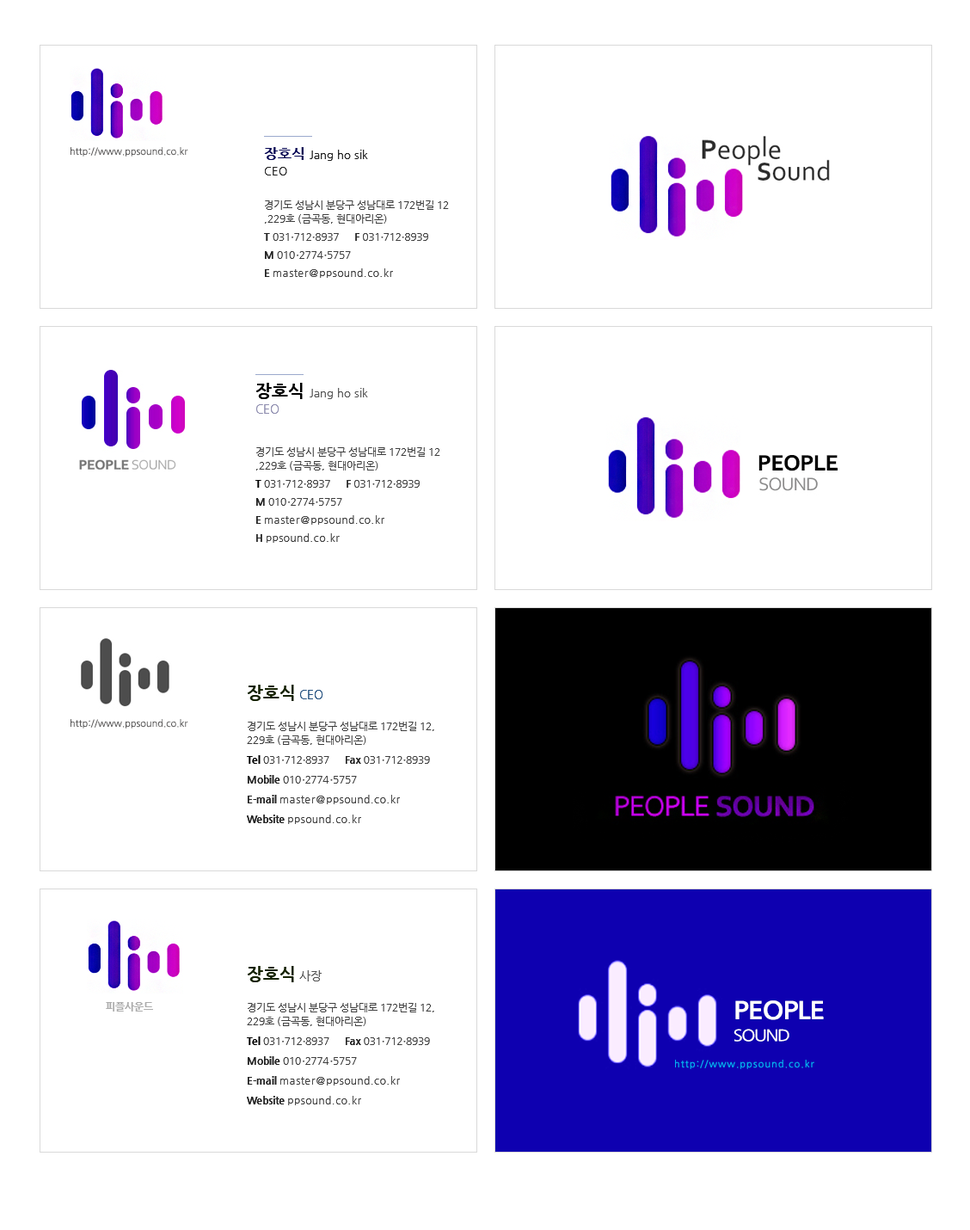
<style>
.page{position:relative;width:970px;height:1230px;background:#ffffff}
.page>*{position:absolute;margin:0}
.t1{font:9.5px "NanumGothic";color:#595858}
.t2{font:11.2px/16.3px "NanumGothic";color:#1e1e1e}
.t3{font:9.5px/16.3px "NanumGothic";color:#3f3f3f}
.t4{font:14.6px/16.3px "NanumGothicBold";color:#000051}
.t5{font:10.3px/18.9px "NanumGothic";color:#3f3f3f}
.t6{font:10.3px/13.8px "NanumGothic";color:#3f3f3f}
.t7{font:10.3px/18.1px "NanumGothicExtraBold";color:#232323}
.t8{font:10.3px/18.1px "NanumGothic";color:#3f3f3f}
.t9{font:10.3px/18.1px "NanumGothic";color:#3f3f3f;font-weight:bold}
.t10{font:10.3px/18.1px "NanumGothic";letter-spacing:0.05em;color:#3f3f3f}
.t11{font:11.2px/16.3px "NanumGothic";color:#555555}
.t12{font:17.2px/16.3px "NanumGothicBold";color:#000000}
.t13{font:12px/16.3px "NanumGothic";color:#8e8daf}
.t14{font:10.3px/18.1px "NanumGothicExtraBold";color:#000000}
.t15{font:17.2px "NanumGothicBold";color:#162301}
.t16{font:9.5px "NanumGothic";color:#3f3f3f}
.t17{font:12px "NanumGothic";color:#23507f}
.t18{font:10.3px/19.8px "NanumGothicExtraBold";color:#000000}
.t19{font:10.3px/19.8px "NanumGothic";color:#3f3f3f}
.t20{font:10.3px/19.8px "NanumGothic";color:#3f3f3f;font-weight:bold}
.t21{font:10.3px/19.8px "NanumGothicExtraBold";color:#232323}
.t22{font:10.3px/19.8px "NanumGothic";letter-spacing:0.05em;color:#3f3f3f}
.t23{font:12px "NanumGothic";color:#525252}
.t24{font:10.3px "NanumGothicExtraBold";color:#acacac}
.t25{font:24.1px/22.4px "NanumGothicBold";letter-spacing:-0.05em;color:#ffffff;scale:1.15 1}
.t26{font:15.5px/22.4px "NanumGothic";letter-spacing:-0.075em;color:#ffffff;scale:1.15 1}
.t27{font:9.5px "NanumGothic";letter-spacing:0.1em;color:#03b0f1}
</style>
<div class="page">
<p class="t1" style="left:71px;top:147px;width:117px;height:9px">http://www.ppsound.co.kr</p>
<p class="t2" style="left:264px;top:147px;width:104px;height:28px"><span class="t3"><br></span><span class="t4">장호식 </span>Jang ho sik<br>CEO</p>
<p class="t5" style="left:264px;top:200px;width:185px;height:78px">경기도 성남시 분당구 성남대로 172번길 12<br><span class="t6">,229호 (금곡동, 현대아리온)<br></span><span class="t7">T </span><span class="t8">031</span><span class="t9">.</span><span class="t8">712</span><span class="t9">.</span><span class="t8">8937      </span><span class="t7">F</span><span class="t8"> 031</span><span class="t9">.</span><span class="t8">712</span><span class="t9">.</span><span class="t8">8939<br></span><span class="t7">M</span><span class="t8"> 010</span><span class="t9">.</span><span class="t8">2774</span><span class="t9">.</span><span class="t8">5757<br></span><span class="t7">E </span><span class="t10">master@ppsound.co.kr</span></p>
<p class="t11" style="left:256px;top:383px;width:112px;height:31px"><span class="t3"><br></span><span class="t12">장호식 </span>Jang ho sik   <br><span class="t13">CEO</span></p>
<p class="t5" style="left:255px;top:447px;width:185px;height:96px">경기도 성남시 분당구 성남대로 172번길 12<br><span class="t6">,229호 (금곡동, 현대아리온)<br></span><span class="t14">T </span><span class="t8">031</span><span class="t9">.</span><span class="t8">712</span><span class="t9">.</span><span class="t8">8937      </span><span class="t7">F</span><span class="t8"> 031</span><span class="t9">.</span><span class="t8">712</span><span class="t9">.</span><span class="t8">8939<br></span><span class="t7">M</span><span class="t8"> 010</span><span class="t9">.</span><span class="t8">2774</span><span class="t9">.</span><span class="t8">5757<br></span><span class="t7">E </span><span class="t10">master@ppsound.co.kr<br></span><span class="t7">H </span><span class="t10">ppsound.co.kr</span></p>
<p class="t15" style="left:248px;top:684px;width:75px;height:17px"><span class="t16"><br></span>장호식 <span class="t17">CEO</span></p>
<p class="t1" style="left:71px;top:719px;width:117px;height:9px">http://www.ppsound.co.kr</p>
<p class="t5" style="left:247px;top:721px;width:187px;height:103px">경기도 성남시 분당구 성남대로 172번길 12,<br><span class="t6">229호 (금곡동, 현대아리온)<br></span><span class="t18">Tel </span><span class="t19">031</span><span class="t20">.</span><span class="t19">712</span><span class="t20">.</span><span class="t19">8937      </span><span class="t21">Fax</span><span class="t19"> 031</span><span class="t20">.</span><span class="t19">712</span><span class="t20">.</span><span class="t19">8939<br></span><span class="t21">Mobile</span><span class="t19"> 010</span><span class="t20">.</span><span class="t19">2774</span><span class="t20">.</span><span class="t19">5757<br></span><span class="t21">E-mail </span><span class="t22">master@ppsound.co.kr<br></span><span class="t21">Website </span><span class="t22">ppsound.co.kr</span></p>
<p class="t15" style="left:248px;top:966px;width:74px;height:16px"><span class="t16"><br></span>장호식 <span class="t23">사장</span></p>
<p class="t24" style="left:106px;top:1002px;width:47px;height:9px">피플사운드</p>
<p class="t25" style="left:733px;top:1000px;width:91px;height:41px">PEOPLE<br><span class="t26">SOUND</span></p>
<p class="t5" style="left:247px;top:1003px;width:187px;height:102px">경기도 성남시 분당구 성남대로 172번길 12,<br><span class="t6">229호 (금곡동, 현대아리온)<br></span><span class="t18">Tel </span><span class="t19">031</span><span class="t20">.</span><span class="t19">712</span><span class="t20">.</span><span class="t19">8937      </span><span class="t21">Fax</span><span class="t19"> 031</span><span class="t20">.</span><span class="t19">712</span><span class="t20">.</span><span class="t19">8939<br></span><span class="t21">Mobile</span><span class="t19"> 010</span><span class="t20">.</span><span class="t19">2774</span><span class="t20">.</span><span class="t19">5757<br></span><span class="t21">E-mail </span><span class="t22">master@ppsound.co.kr<br></span><span class="t21">Website </span><span class="t22">ppsound.co.kr</span></p>
<p class="t27" style="left:675px;top:1059px;width:139px;height:10px">http://www.ppsound.co.kr</p>
</div>
